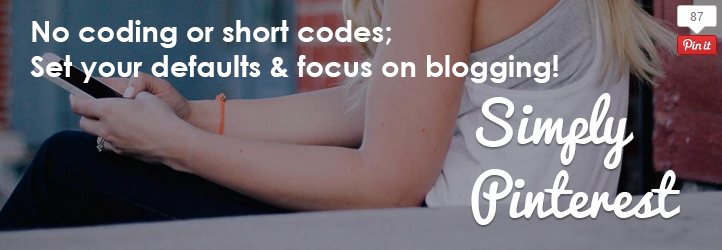
<style>
.page{position:relative;width:722px;height:250px}
.page>*{position:absolute;margin:0}
.t1{font:29px "CenturyGothic-Bold";color:#ffffff}
.t2{font:54.8px/74.9px "Pacifico";color:#ffffff}
.t3{font:54.8px "Pacifico";color:#ffffff}
</style>
<div class="page">
<p class="t1" style="left:30px;top:20px;width:528px;height:63px">No coding or short codes;<br>Set your defaults &amp; focus on blogging!</p>
<p class="t2" style="left:471px;top:93px;width:209px;height:132px"><span class="t3">Simply<br></span>Pinterest</p>
</div>
